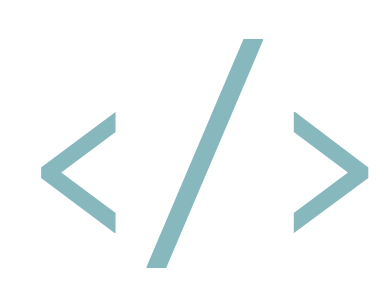
<style>
.page{position:relative;width:387px;height:286px;background:#ffffff}
.page>*{position:absolute;margin:0}
.t1{font:300px "AgencyFB-Reg";letter-spacing:0.025em;color:#87b8be}
</style>
<div class="page">
<p class="t1" style="left:41px;top:39px;width:328px;height:229px">&lt;/&gt;</p>
</div>
